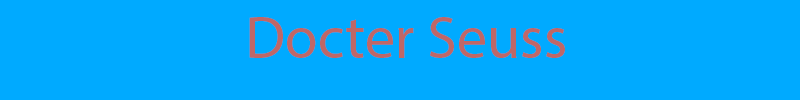
<style>
.page{position:relative;width:800px;height:100px;background:#00aaff}
.page>*{position:absolute;margin:0}
.t1{font:60px "MyriadPro-Regular";color:#bf6767}
</style>
<div class="page">
<p class="t1" style="left:249px;top:17px;width:316px;height:41px">Docter Seuss</p>
</div>
